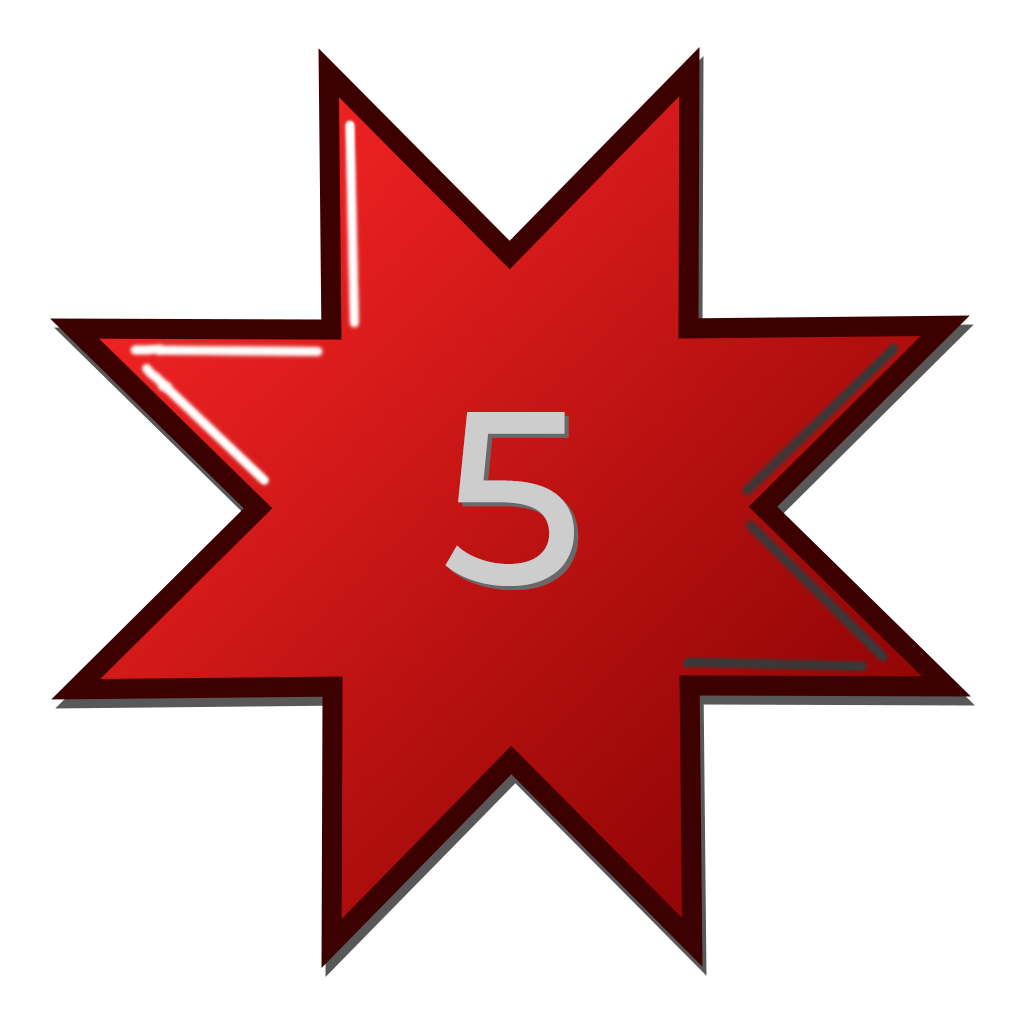
<style>
.page{position:relative;width:1024px;height:1024px;background:#ffffff}
.page>*{position:absolute;margin:0}
.t1{font:245.4px "Montserrat-Medium";color:#cdcdcd}
</style>
<div class="page">
<p class="t1" style="left:445px;top:412px;width:129px;height:174px">5</p>
<p class="t1" style="left:449px;top:416px;width:130px;height:174px">5</p>
</div>
